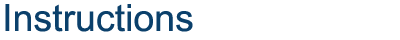
<style>
.page{position:relative;width:400px;height:40px;background:#ffffff}
.page>*{position:absolute;margin:0}
.t1{font:37.5px "ArialMT";color:#0b406b}
</style>
<div class="page">
<p class="t1" style="left:5px;top:4px;width:188px;height:28px">Instructions</p>
</div>
